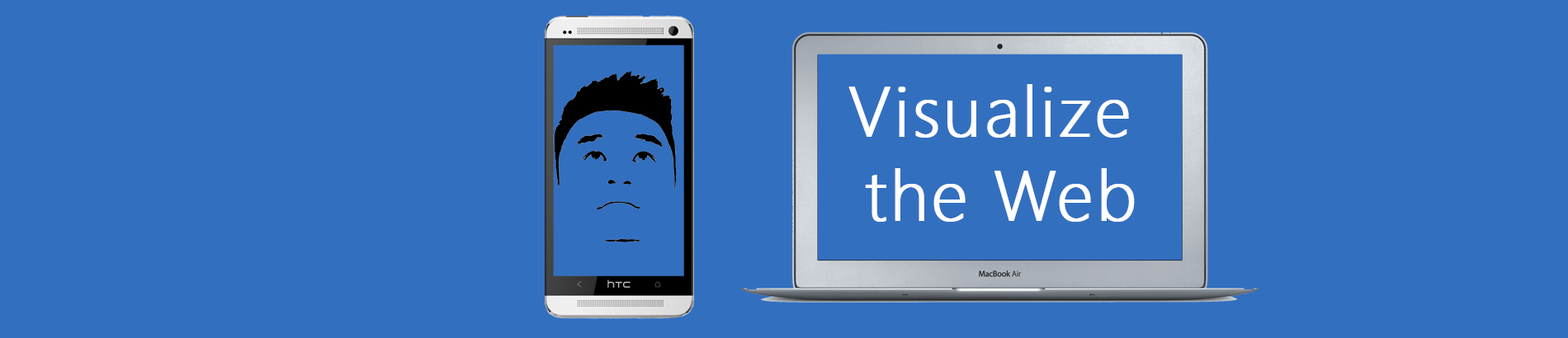
<style>
.page{position:relative;width:1568px;height:338px;background:#336fbf}
.page>*{position:absolute;margin:0}
.t1{font:70.1px "SegoeUI-Light";letter-spacing:0.025em;color:#ffffff;font-weight:bold}
</style>
<div class="page">
<p class="t1" style="left:848px;top:84px;width:287px;height:138px;text-align:center">Visualize <br>the Web</p>
</div>
